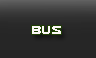
<style>
.page{position:relative;width:96px;height:58px;background:#262626}
.page>*{position:absolute;margin:0}
.t1{font:13px "Usuzi";color:#fbf6f6}
</style>
<div class="page">
<p class="t1" style="left:32px;top:26px;width:29px;height:8px">bus</p>
</div>
